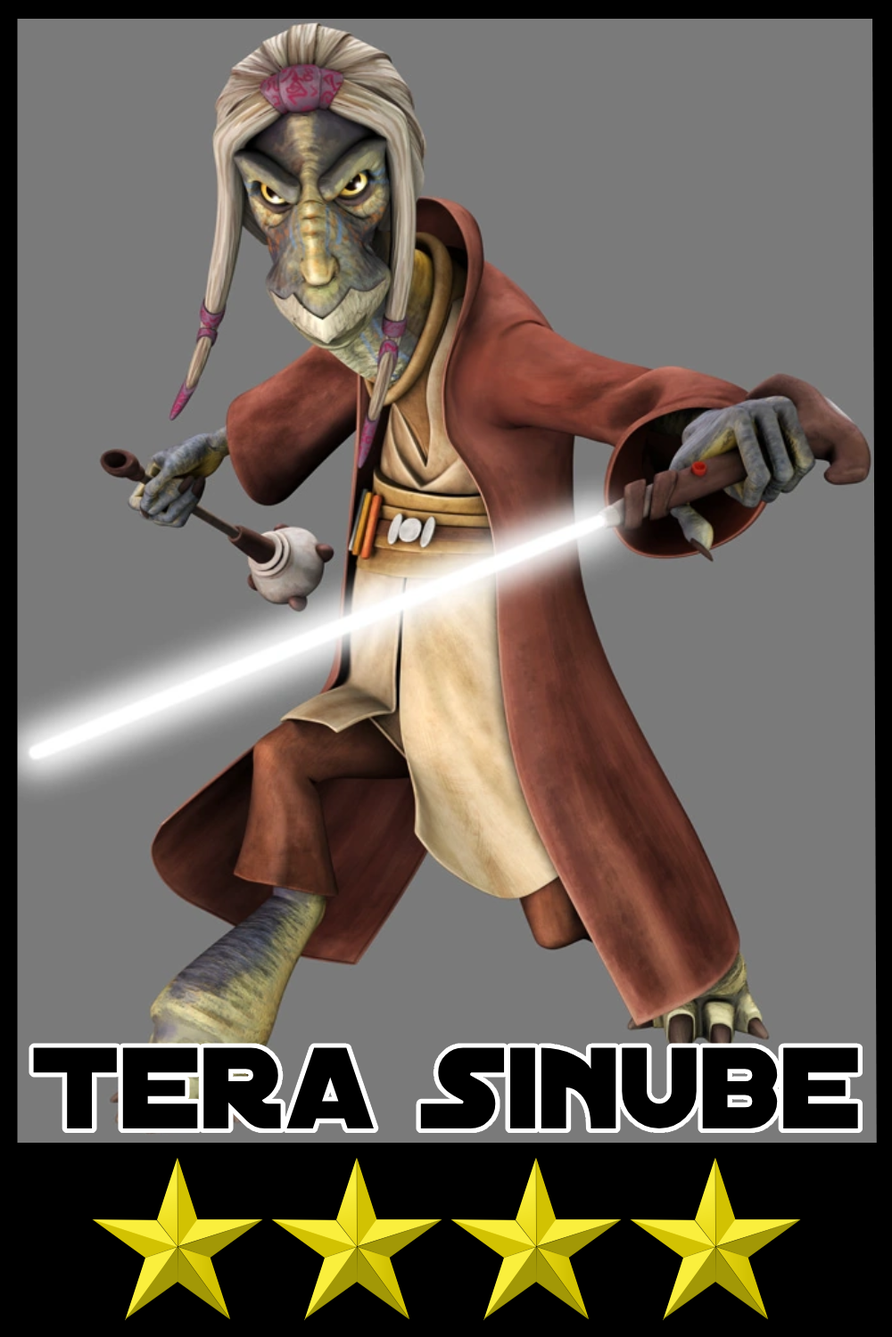
<style>
.page{position:relative;width:892px;height:1337px;background:#7a7a7a}
.page>*{position:absolute;margin:0}
.t1{font:124.1px "DistantGalaxy";color:#000000}
</style>
<div class="page">
<p class="t1" style="left:33px;top:1048px;width:825px;height:81px">Tera Sinube</p>
</div>
